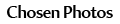
<style>
.page{position:relative;width:120px;height:24px;background:#ffffff}
.page>*{position:absolute;margin:0}
.t1{font:17.3px "AmiraParadiso";letter-spacing:-0.04em;color:#000000}
</style>
<div class="page">
<p class="t1" style="left:7px;top:5px;width:106px;height:13px">Chosen Photos</p>
</div>
